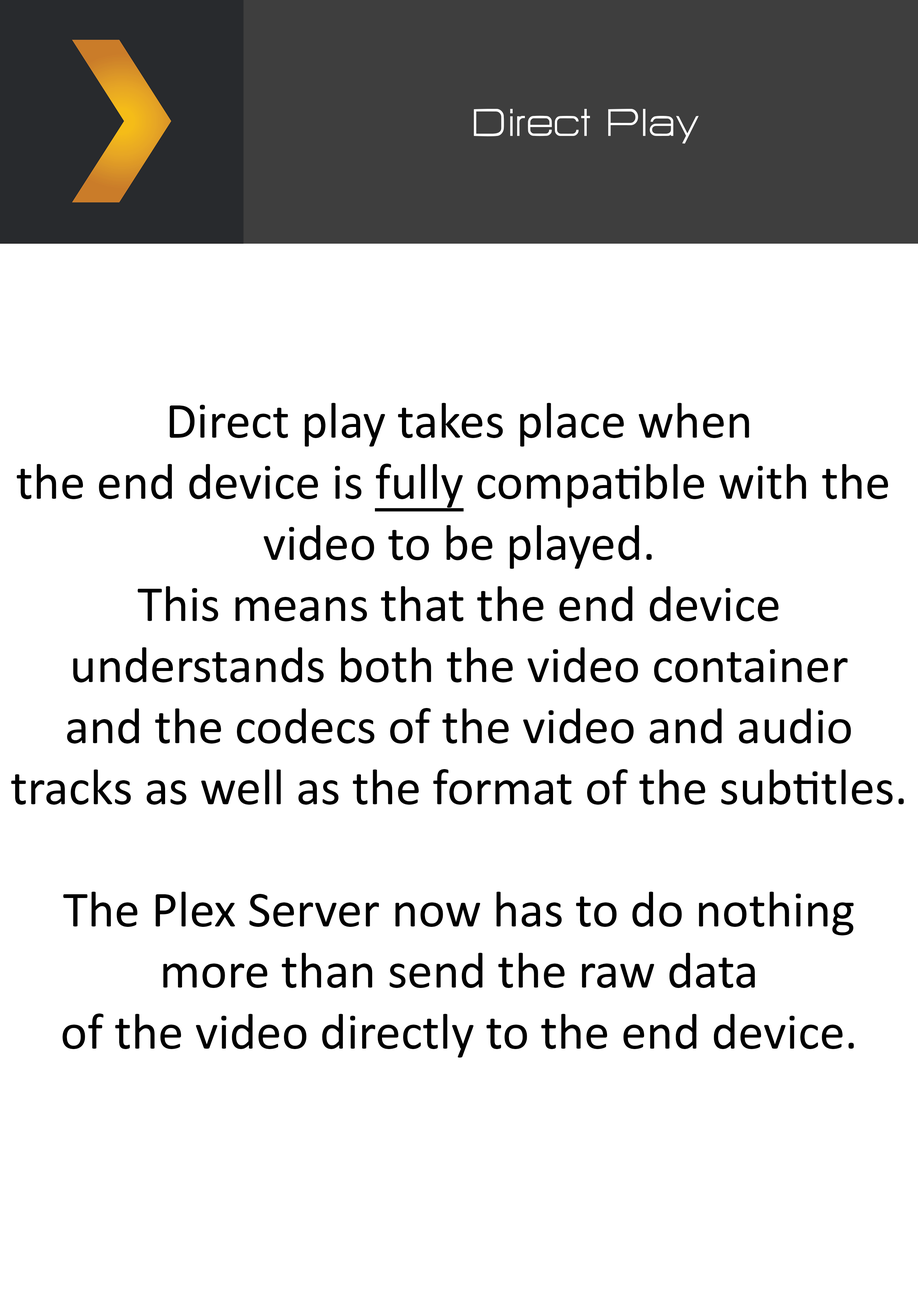
<style>
.page{position:relative;width:918px;height:1299px;background:#ffffff}
.page>*{position:absolute;margin:0}
.t1{font:47.8px "HURTMOLDPersonalUse-Regular";color:#ffffff}
.t2{font:50.9px "Calibri";color:#000000}
.t3{font:50.9px "Calibri";color:#000000;text-decoration:underline}
</style>
<div class="page">
<p class="t1" style="left:474px;top:109px;width:225px;height:35px">Direct Play</p>
<p class="t2" style="left:11px;top:403px;width:893px;height:654px;text-align:center">Direct play takes place when<br>the end device is <span class="t3">fully</span> compatible with the <br>video to be played.<br>This means that the end device<br>understands both the video container<br>and the codecs of the video and audio<br>tracks as well as the format of the subtitles.<br><br>The Plex Server now has to do nothing<br>more than send the raw data<br>of the video directly to the end device.</p>
</div>
